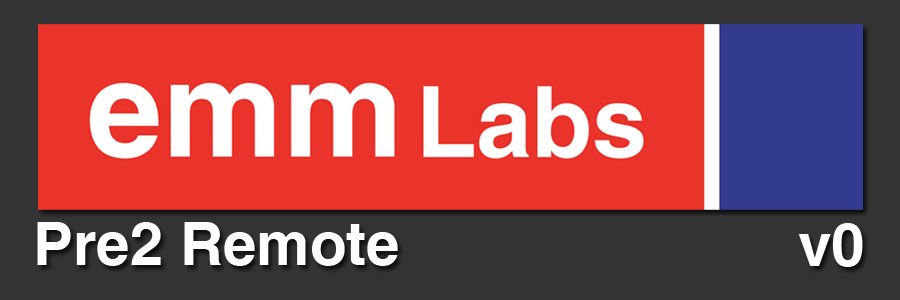
<style>
.page{position:relative;width:900px;height:300px;background:#ea332b}
.page>*{position:absolute;margin:0}
.t1{font:60px "HelveticaLTCom-Bold";color:#ffffff}
</style>
<div class="page">
<p class="t1" style="left:37px;top:222px;width:361px;height:44px">Pre2 Remote</p>
<p class="t1" style="left:798px;top:223px;width:65px;height:44px">v0</p>
</div>
